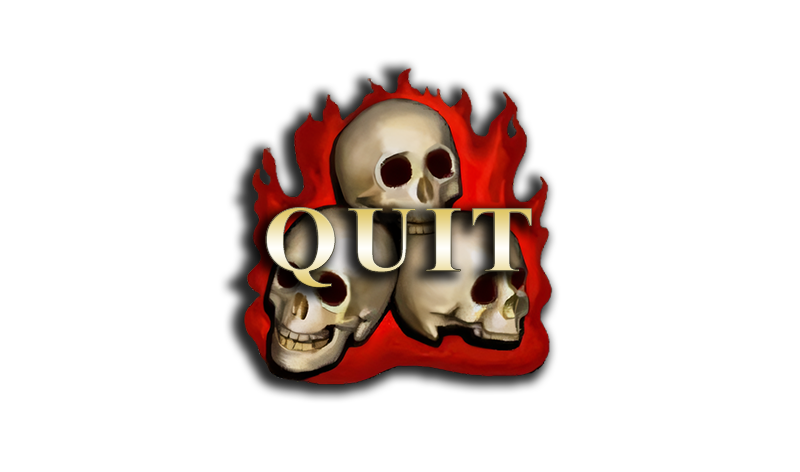
<style>
.page{position:relative;width:800px;height:472px;background:#ffffff}
.page>*{position:absolute;margin:0}
.t1{font:94px "TimesNewRomanPS-BoldMT";letter-spacing:0.07em;scale:1.05 1}
</style>
<div class="page">
<p class="t1" style="left:266px;top:207px;width:266px;height:81px">QUIT</p>
</div>
